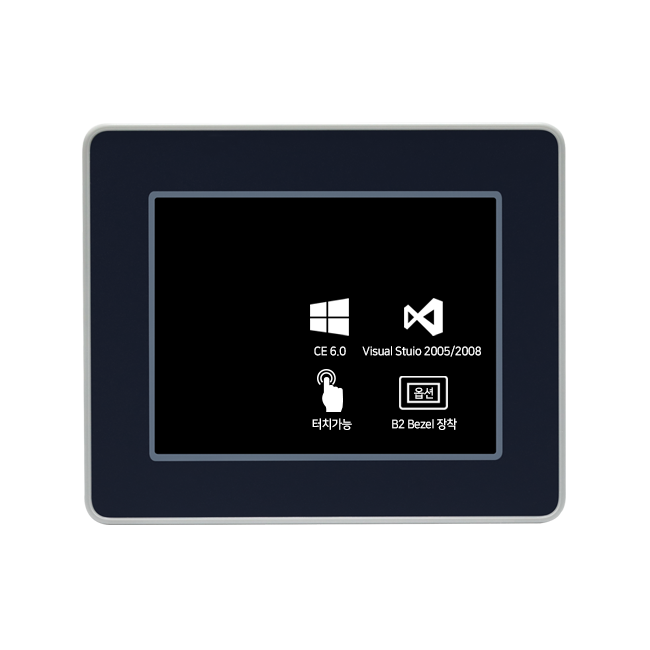
<style>
.page{position:relative;width:650px;height:650px;background:#ffffff}
.page>*{position:absolute;margin:0}
.t1{font:12px "NanumSquareB";letter-spacing:-0.03em;color:#ffffff;scale:0.95 1}
</style>
<div class="page">
<p class="t1" style="left:314px;top:346px;width:32px;height:10px">CE 6.0</p>
<p class="t1" style="left:362px;top:345px;width:119px;height:12px">Visual Stuio 2005/2008</p>
<p class="t1" style="left:414px;top:387px;width:19px;height:12px">옵션</p>
<p class="t1" style="left:312px;top:418px;width:40px;height:12px">터치가능</p>
<p class="t1" style="left:392px;top:418px;width:65px;height:12px">B2 Bezel 장착</p>
</div>
